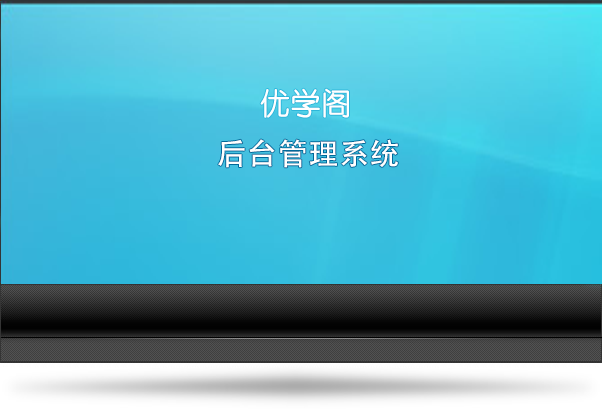
<style>
.page{position:relative;width:602px;height:409px}
.page>*{position:absolute;margin:0}
.t1{font:30px "STYuanti-SC-Regular";letter-spacing:0.02em;color:#ffffff}
.t2{font:30px "AdobeHeitiStd-Regular";letter-spacing:0.02em;color:#ffffff}
</style>
<div class="page">
<p class="t1" style="left:260px;top:88px;width:89px;height:30px">优学阁</p>
<p class="t2" style="left:218px;top:139px;width:180px;height:29px">后台管理系统</p>
</div>
